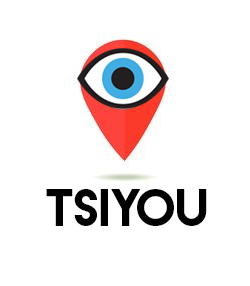
<style>
.page{position:relative;width:250px;height:286px;background:#ffffff}
.page>*{position:absolute;margin:0}
.t1{font:46.8px "LemonMilk";color:#000000}
</style>
<div class="page">
<p class="t1" style="left:46px;top:189px;width:161px;height:37px">TsiYou</p>
</div>
